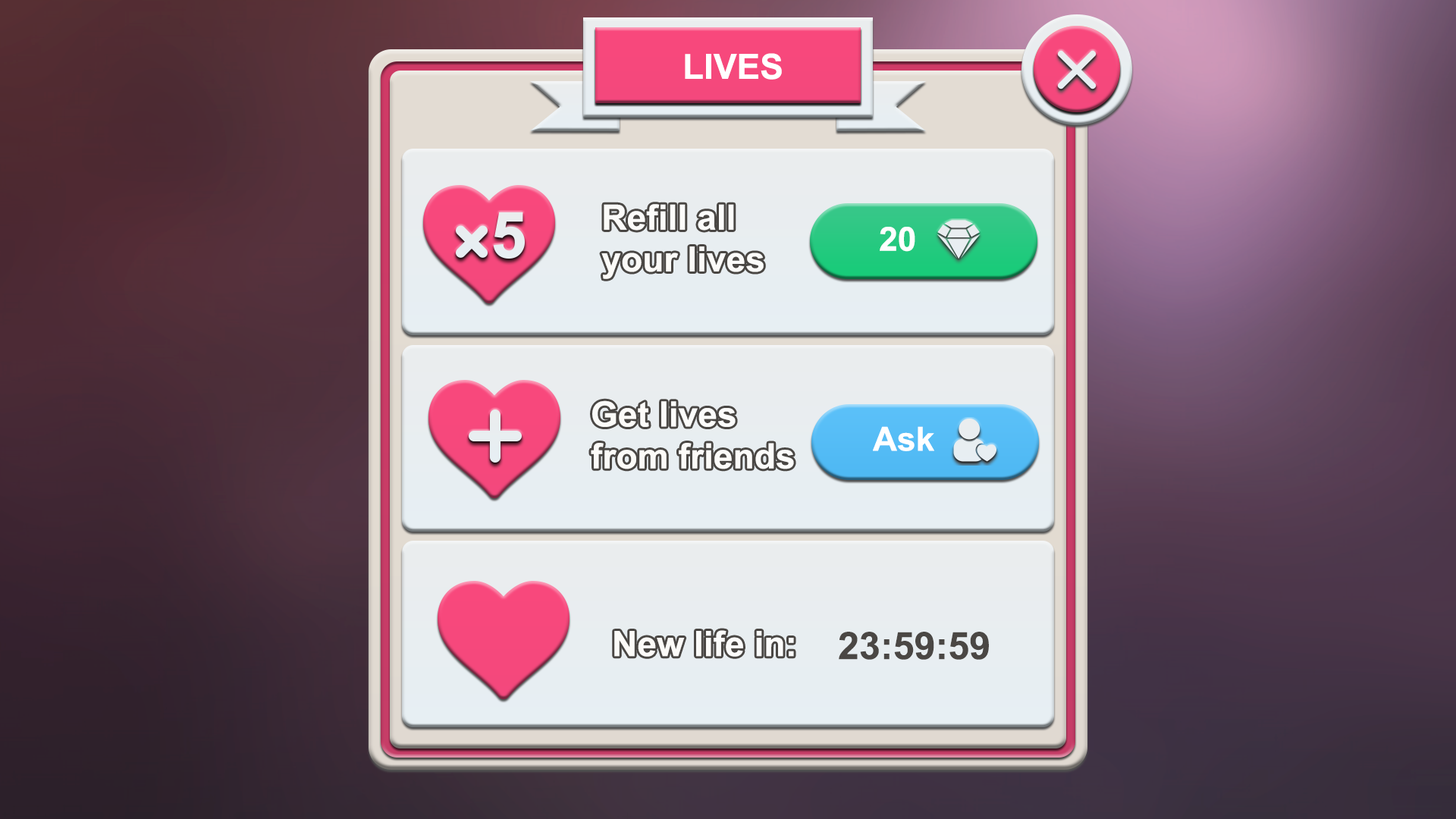
<style>
.page{position:relative;width:1456px;height:819px}
.page>*{position:absolute;margin:0}
.t1{font:34.9px "Arial-BoldMT";color:#ffffff}
.t2{font:33.3px "Arial-BoldMT";color:#ffffff}
.t3{font:37.9px "Arial-BoldMT";color:#4a4744}
</style>
<div class="page">
<p class="t1" style="left:685px;top:53px;width:97px;height:27px">LIVES</p>
<p class="t1" style="left:601px;top:204px;width:163px;height:75px">Refill all <br>your lives</p>
<p class="t2" style="left:880px;top:227px;width:35px;height:25px">20</p>
<p class="t1" style="left:591px;top:400px;width:203px;height:69px">Get lives<br>from friends</p>
<p class="t2" style="left:873px;top:426px;width:61px;height:25px">Ask</p>
<p class="t1" style="left:614px;top:630px;width:180px;height:27px">New life in:</p>
<p class="t3" style="left:839px;top:632px;width:150px;height:28px">23:59:59</p>
</div>
